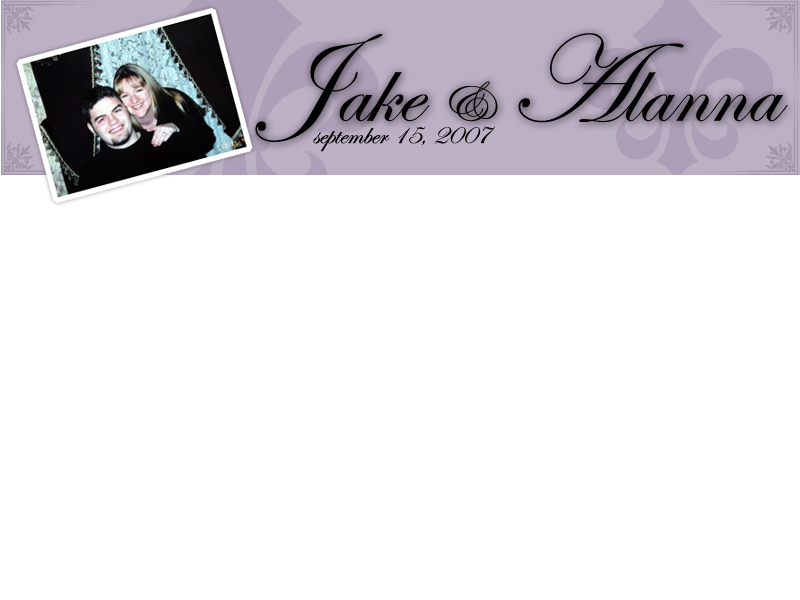
<style>
.page{position:relative;width:800px;height:600px;background:#ffffff}
.page>*{position:absolute;margin:0}
.t1{font:96px "EdwardianScriptITC";color:#000000}
.t2{font:126px "EdwardianScriptITC";color:#000000}
.t3{font:60px "EdwardianScriptITC";color:#000000}
.t4{font:30px "EdwardianScriptITC";color:#000000}
</style>
<div class="page">
<p class="t1" style="left:255px;top:33px;width:533px;height:109px"><span class="t2">J</span>ake <span class="t3">&amp; </span><span class="t2">A</span>lanna</p>
<p class="t4" style="left:313px;top:126px;width:182px;height:26px">september 15, 2007</p>
</div>
